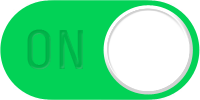
<style>
.page{position:relative;width:200px;height:100px;background:#02d256}
.page>*{position:absolute;margin:0}
.t1{font:54px "JetBrainsMono-Medium";color:#00b449}
</style>
<div class="page">
<p class="t1" style="left:27px;top:29px;width:56px;height:41px">ON</p>
</div>
